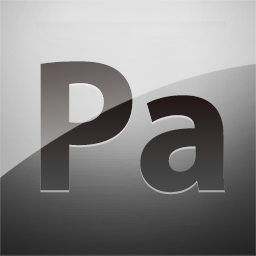
<style>
.page{position:relative;width:256px;height:256px}
.page>*{position:absolute;margin:0}
.t1{font:189.5px "MyriadPro-Bold"}
</style>
<div class="page">
<p class="t1" style="left:40px;top:61px;width:185px;height:132px">Pa</p>
</div>
